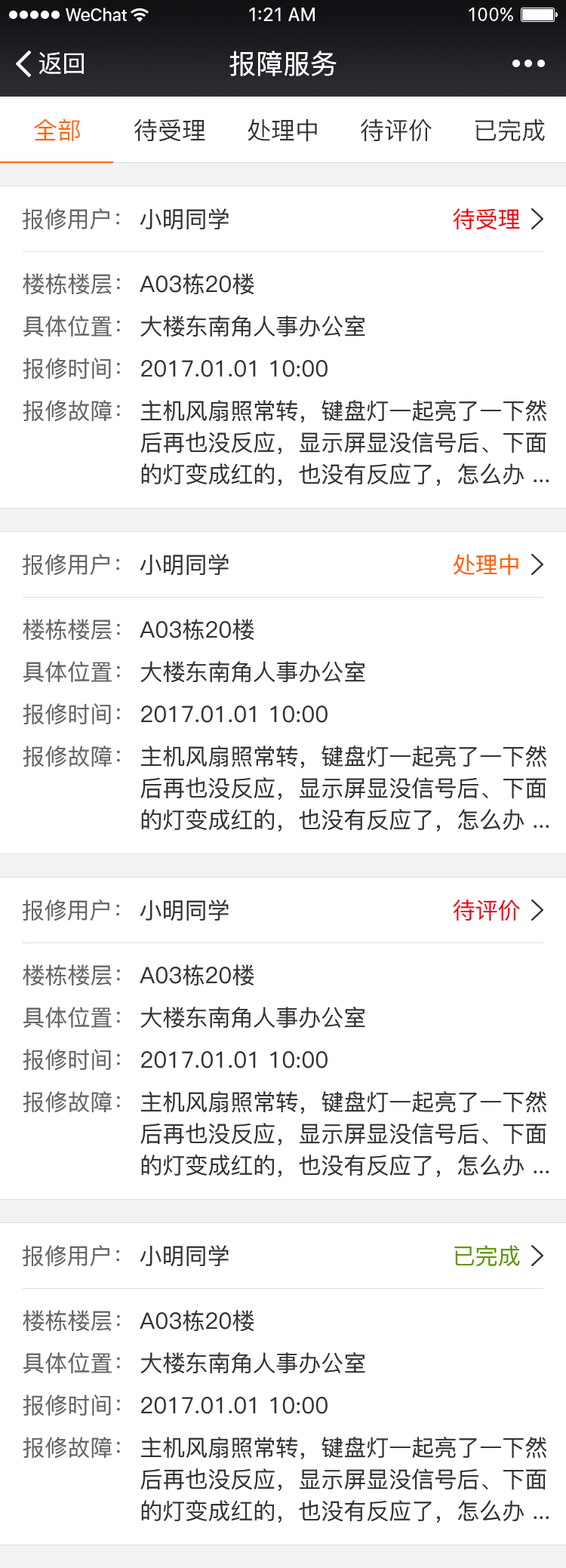
<style>
.page{position:relative;width:566px;height:1568px;background:#ffffff}
.page>*{position:absolute;margin:0}
.t1{font:24.1px "PingFang-SC-Medium";color:#ffffff}
.t2{font:27.2px "PingFang-SC-Medium";color:#ffffff}
.t3{font:24.1px "PingFang-SC-Medium";color:#ff6405}
.t4{font:24.1px "PingFang-SC-Medium";color:#323232}
.t5{font:24.1px "PingFang-SC-Medium";color:#333333}
.t6{font:22.6px "PingFang-SC-Medium";color:#666666}
.t7{font:22.6px "PingFang-SC-Medium";color:#333333}
.t8{font:22.6px "PingFang-SC-Medium";color:#f10215}
.t9{font:22.6px/42.3px "PingFang-SC-Medium";color:#666666}
.t10{font:22.6px/42.3px "PingFang-SC-Medium";color:#333333}
.t11{font:22.6px/31.7px "PingFang-SC-Medium";color:#333333}
.t12{font:22.6px "PingFang-SC-Medium";color:#ff6405}
.t13{font:22.6px "PingFang-SC-Medium";color:#609700}
</style>
<div class="page">
<p class="t1" style="left:39px;top:52px;width:45px;height:23px">返回</p>
<p class="t2" style="left:229px;top:51px;width:108px;height:25px">报障服务</p>
<p class="t3" style="left:34px;top:118px;width:46px;height:24px">全部</p>
<p class="t4" style="left:134px;top:118px;width:71px;height:24px">待受理</p>
<p class="t5" style="left:247px;top:118px;width:70px;height:24px">处理中</p>
<p class="t4" style="left:361px;top:118px;width:71px;height:24px">待评价</p>
<p class="t4" style="left:475px;top:118px;width:70px;height:24px">已完成</p>
<p class="t6" style="left:22px;top:208px;width:97px;height:22px">报修用户：</p>
<p class="t7" style="left:140px;top:208px;width:89px;height:22px">小明同学</p>
<p class="t8" style="left:453px;top:208px;width:67px;height:21px">待受理</p>
<p class="t9" style="left:23px;top:273px;width:97px;height:149px">楼栋楼层：<br>具体位置：<br>报修时间：<br>报修故障：</p>
<p class="t10" style="left:140px;top:273px;width:409px;height:213px">A03栋20楼<br>大楼东南角人事办公室<br>2017.01.01 10:00<br>主机风扇照常转，键盘灯一起亮了一下然<br><span class="t11">后再也没反应，显示屏显没信号后、下面<br>的灯变成红的，也没有反应了，怎么办 ...</span></p>
<p class="t6" style="left:22px;top:554px;width:97px;height:22px">报修用户：</p>
<p class="t7" style="left:140px;top:554px;width:89px;height:22px">小明同学</p>
<p class="t12" style="left:453px;top:554px;width:65px;height:22px">处理中</p>
<p class="t9" style="left:23px;top:619px;width:97px;height:148px">楼栋楼层：<br>具体位置：<br>报修时间：<br>报修故障：</p>
<p class="t10" style="left:140px;top:619px;width:409px;height:213px">A03栋20楼<br>大楼东南角人事办公室<br>2017.01.01 10:00<br>主机风扇照常转，键盘灯一起亮了一下然<br><span class="t11">后再也没反应，显示屏显没信号后、下面<br>的灯变成红的，也没有反应了，怎么办 ...</span></p>
<p class="t6" style="left:22px;top:899px;width:97px;height:22px">报修用户：</p>
<p class="t7" style="left:140px;top:899px;width:89px;height:22px">小明同学</p>
<p class="t8" style="left:453px;top:899px;width:67px;height:22px">待评价</p>
<p class="t9" style="left:23px;top:964px;width:97px;height:149px">楼栋楼层：<br>具体位置：<br>报修时间：<br>报修故障：</p>
<p class="t10" style="left:140px;top:964px;width:409px;height:213px">A03栋20楼<br>大楼东南角人事办公室<br>2017.01.01 10:00<br>主机风扇照常转，键盘灯一起亮了一下然<br><span class="t11">后再也没反应，显示屏显没信号后、下面<br>的灯变成红的，也没有反应了，怎么办 ...</span></p>
<p class="t6" style="left:22px;top:1245px;width:97px;height:22px">报修用户：</p>
<p class="t7" style="left:140px;top:1245px;width:89px;height:22px">小明同学</p>
<p class="t13" style="left:454px;top:1245px;width:66px;height:22px">已完成</p>
<p class="t9" style="left:23px;top:1310px;width:97px;height:149px">楼栋楼层：<br>具体位置：<br>报修时间：<br>报修故障：</p>
<p class="t10" style="left:140px;top:1310px;width:409px;height:213px">A03栋20楼<br>大楼东南角人事办公室<br>2017.01.01 10:00<br>主机风扇照常转，键盘灯一起亮了一下然<br><span class="t11">后再也没反应，显示屏显没信号后、下面<br>的灯变成红的，也没有反应了，怎么办 ...</span></p>
</div>
